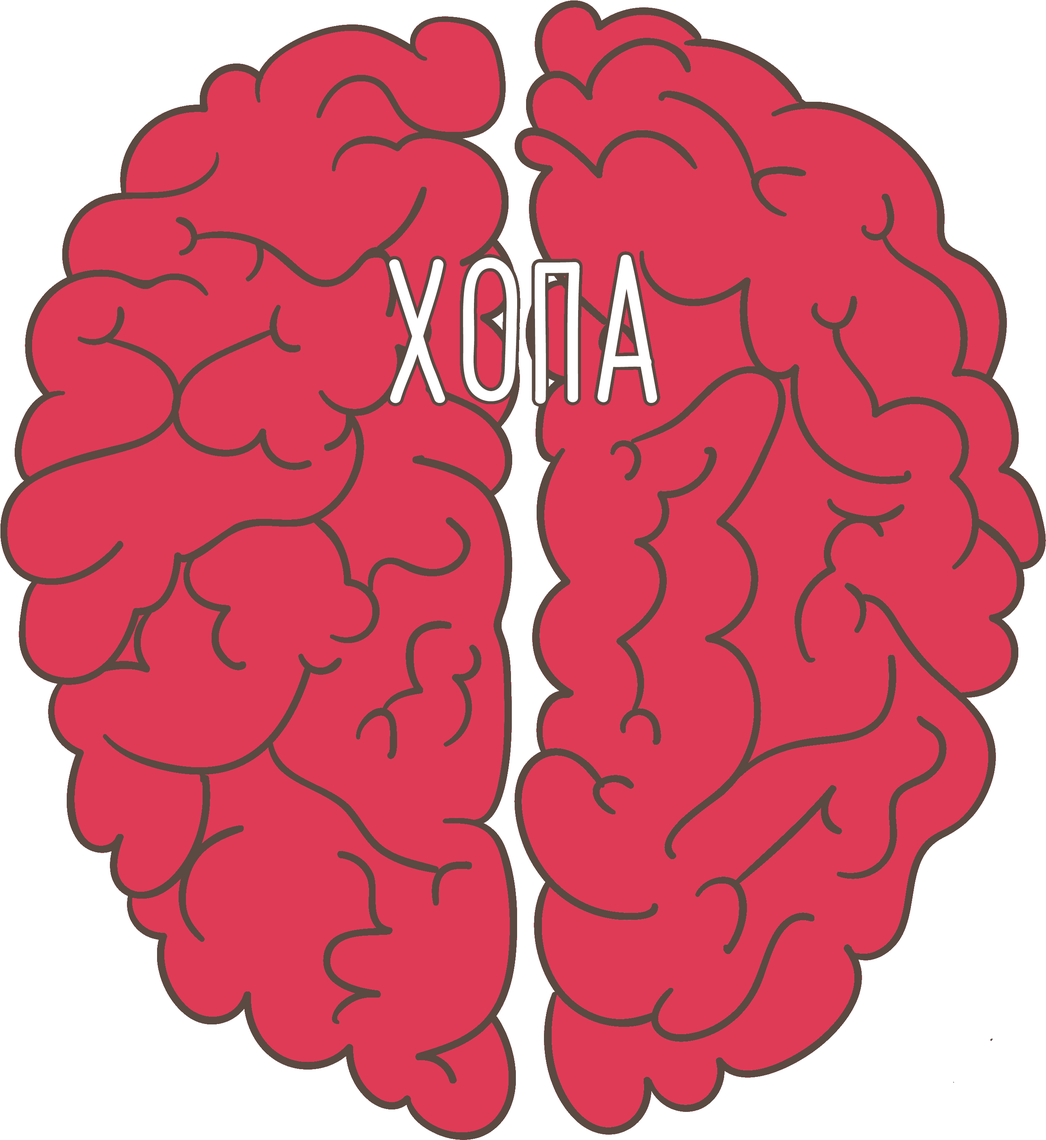
<style>
.page{position:relative;width:1046px;height:1140px;background:#df3b57}
.page>*{position:absolute;margin:0}
.t1{font:122.1px "PapayaSunrise";color:#ffffff;font-weight:bold}
</style>
<div class="page">
<p class="t1" style="left:389px;top:255px;width:268px;height:149px">Хопа</p>
</div>
